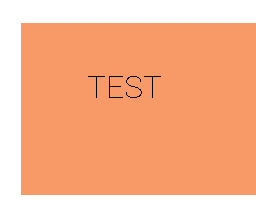
<style>
.page{position:relative;width:256px;height:216px;background:#f89a68}
.page>*{position:absolute;margin:0}
.t1{font:32px "Roboto-Thin";color:#000000}
</style>
<div class="page">
<p class="t1" style="left:88px;top:76px;width:73px;height:22px">TEST</p>
</div>
